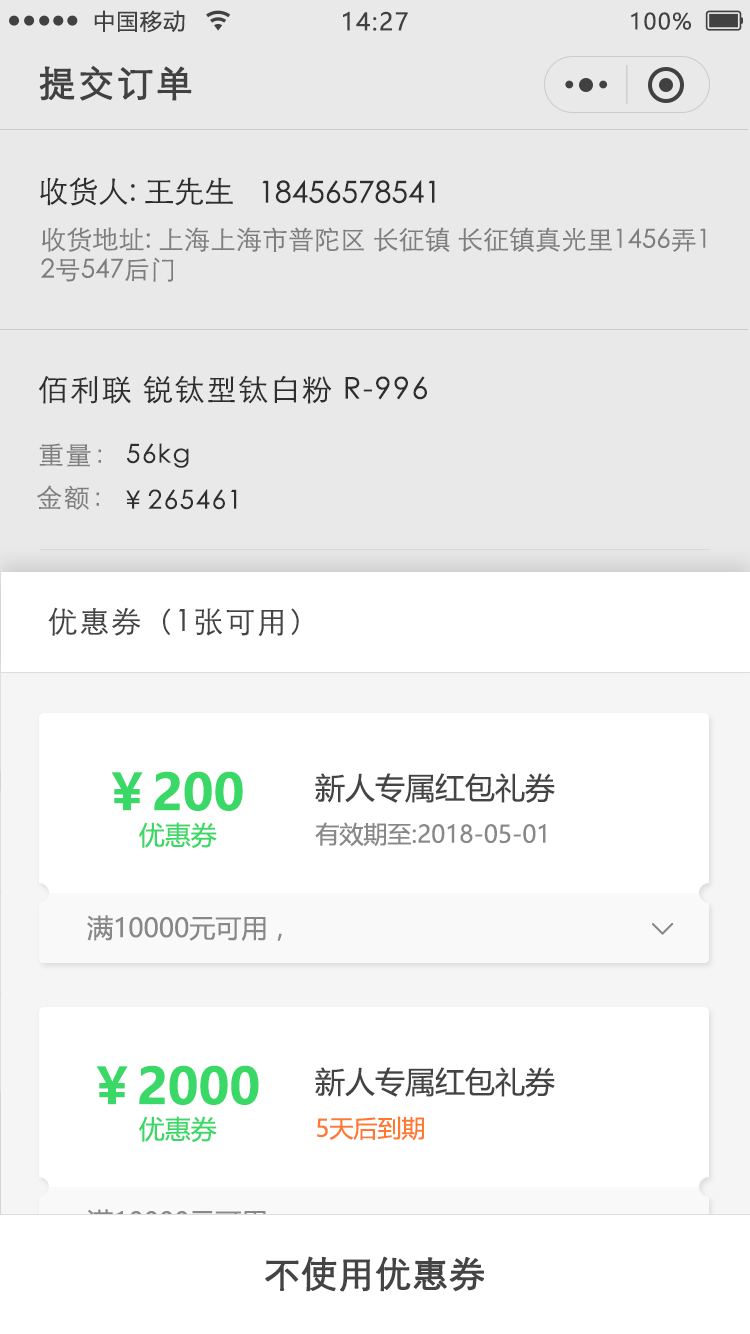
<style>
.page{position:relative;width:750px;height:1334px;background:#ffffff}
.page>*{position:absolute;margin:0}
.t1{font:22px "MicrosoftYaHei";letter-spacing:0.06em;color:#444444}
.t2{font:24px "MicrosoftYaHei";letter-spacing:0.06em;color:#444444}
.t3{font:36px "STXihei";letter-spacing:0.06em;color:#444444;font-weight:bold}
.t4{font:30px "STXihei";color:#302f2f}
.t5{font:26px/30px "STXihei";color:#888888}
.t6{font:30px "STXihei";letter-spacing:0.06em;color:#302f2f}
.t7{font:26px "STXihei";letter-spacing:0.06em;color:#888888}
.t8{font:26px "STXihei";letter-spacing:0.06em;color:#302f2f}
.t9{font:30px "STXihei";letter-spacing:0.06em;color:#444444}
.t10{font:50px "MicrosoftYaHei-Bold";color:#3ad967}
.t11{font:30px "MicrosoftYaHei";color:#444444}
.t12{font:26px "MicrosoftYaHei";color:#3ad967}
.t13{font:24px "MicrosoftYaHei";color:#888888}
.t14{font:26px "MicrosoftYaHei";color:#888888}
.t15{font:29.6px "NSimSun";letter-spacing:0.06em;color:#888888;font-weight:bold}
.t16{font:24px "MicrosoftYaHei";color:#ff782f}
.t17{font:36px "STXihei";color:#444444;font-weight:bold}
</style>
<div class="page">
<p class="t1" style="left:94px;top:10px;width:91px;height:23px">中国移动</p>
<p class="t2" style="left:343px;top:11px;width:65px;height:20px">14:27</p>
<p class="t1" style="left:631px;top:12px;width:60px;height:18px">100%</p>
<p class="t3" style="left:39px;top:65px;width:153px;height:36px">提交订单</p>
<p class="t4" style="left:40px;top:177px;width:193px;height:29px">收货人: 王先生</p>
<p class="t4" style="left:262px;top:180px;width:173px;height:24px">18456578541</p>
<p class="t5" style="left:41px;top:227px;width:665px;height:55px">收货地址: 上海上海市普陀区 长征镇 长征镇真光里1456弄1<br>2号547后门</p>
<p class="t6" style="left:38px;top:375px;width:389px;height:29px">佰利联 锐钛型钛白粉 R-996</p>
<p class="t7" style="left:39px;top:443px;width:62px;height:24px">重量：</p>
<p class="t8" style="left:127px;top:443px;width:62px;height:25px">56kg</p>
<p class="t7" style="left:37px;top:485px;width:62px;height:25px">金额：</p>
<p class="t8" style="left:126px;top:489px;width:111px;height:21px">￥265461</p>
<p class="t9" style="left:48px;top:607px;width:251px;height:29px">优惠券（1张可用）</p>
<p class="t10" style="left:111px;top:771px;width:132px;height:40px">￥200</p>
<p class="t11" style="left:315px;top:773px;width:240px;height:30px">新人专属红包礼券</p>
<p class="t12" style="left:139px;top:822px;width:78px;height:26px">优惠券</p>
<p class="t13" style="left:315px;top:822px;width:231px;height:25px">有效期至:2018-05-01</p>
<p class="t14" style="left:87px;top:915px;width:195px;height:26px">满10000元可用，</p>
<p class="t15" style="left:652px;top:923px;width:22px;height:12px;rotate:-90deg">&lt;</p>
<p class="t10" style="left:96px;top:1065px;width:163px;height:40px">￥2000</p>
<p class="t11" style="left:315px;top:1067px;width:240px;height:30px">新人专属红包礼券</p>
<p class="t12" style="left:139px;top:1116px;width:78px;height:26px">优惠券</p>
<p class="t16" style="left:317px;top:1116px;width:107px;height:25px">5天后到期</p>
<p class="t17" style="left:265px;top:1256px;width:219px;height:36px">不使用优惠券</p>
</div>
